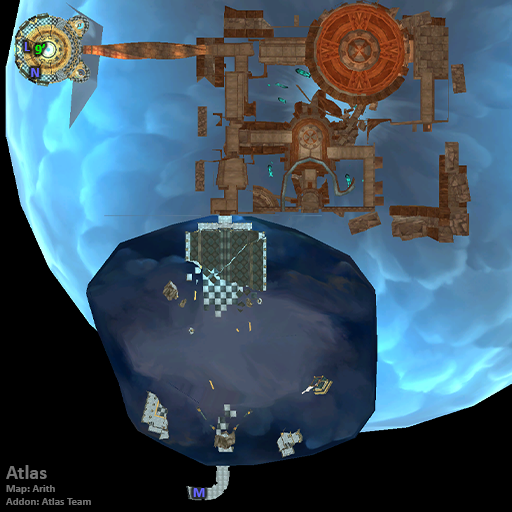
<style>
.page{position:relative;width:512px;height:512px;background:#000000}
.page>*{position:absolute;margin:0}
.t1{font:14px "Calibri-Bold";color:#6666ff}
.t2{font:14px "Calibri-Bold";color:#00ff00}
.t3{font:11px "Calibri-Bold";color:#747474}
.t4{font:20px "Calibri-Bold";color:#747474}
</style>
<div class="page">
<p class="t1" style="left:24px;top:42px;width:6px;height:9px">L</p>
<p class="t2" style="left:35px;top:44px;width:10px;height:10px">9’</p>
<p class="t1" style="left:31px;top:68px;width:8px;height:9px">N</p>
<p class="t3" style="left:6px;top:465px;width:85px;height:40px"><span class="t4">Atlas<br></span>Map: Arith<br>Addon: Atlas Team</p>
<p class="t1" style="left:193px;top:488px;width:12px;height:9px">M</p>
</div>
